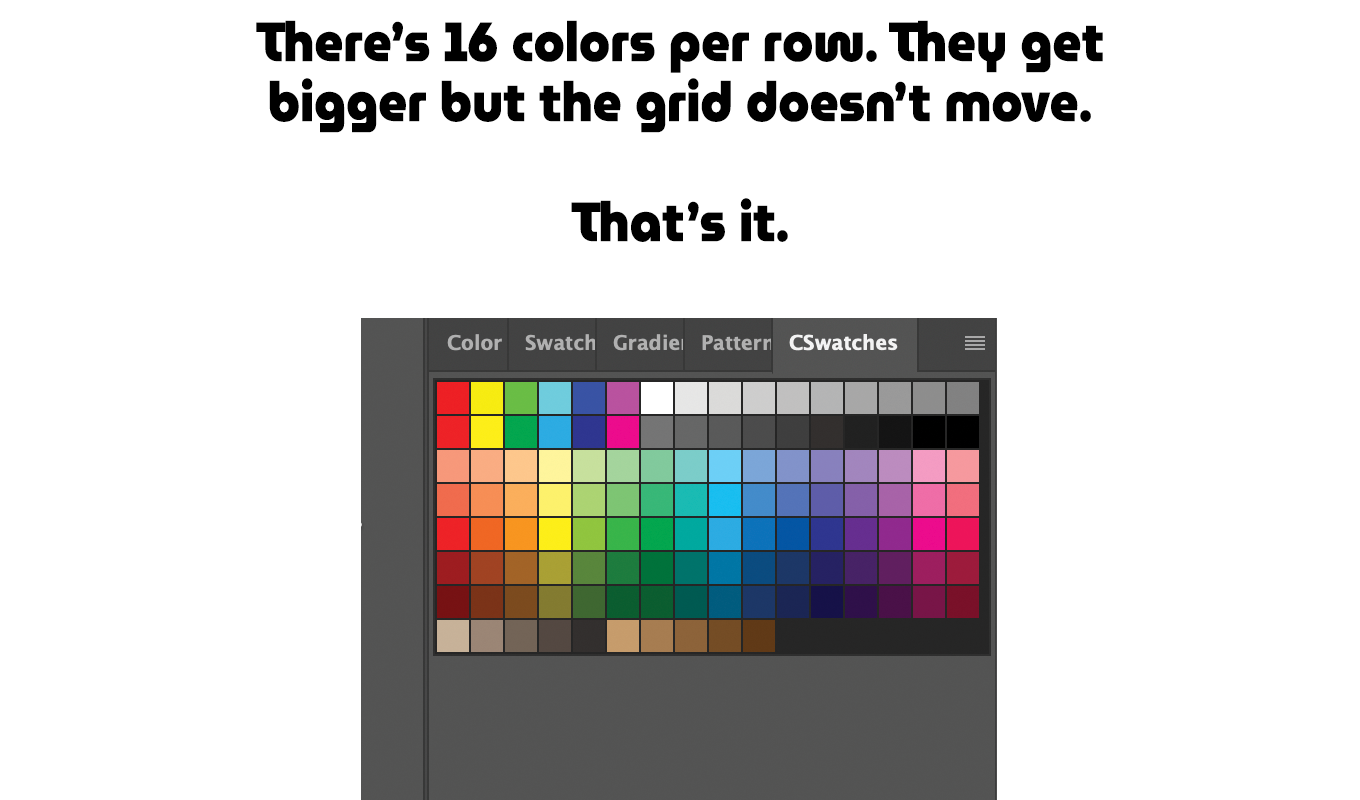
<style>
.page{position:relative;width:1360px;height:800px;background:#ffffff}
.page>*{position:absolute;margin:0}
.t1{font:55px "MuseoModerno-Black";color:#000000;scale:0.91 1}
</style>
<div class="page">
<p class="t1" style="left:256px;top:20px;width:847px;height:222px;text-align:center">There’s 16 colors per row. They get bigger but the grid doesn’t move. <br><br>That’s it.</p>
</div>
